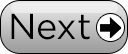
<style>
.page{position:relative;width:128px;height:54px}
.page>*{position:absolute;margin:0}
.t1{font:36px "Gotham-Book";color:#000000}
</style>
<div class="page">
<p class="t1" style="left:11px;top:13px;width:79px;height:27px">Next</p>
</div>
